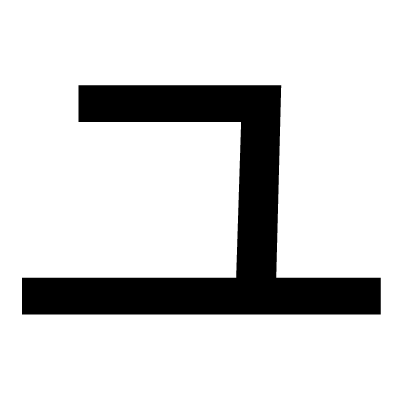
<style>
.page{position:relative;width:400px;height:400px;background:#ffffff}
.page>*{position:absolute;margin:0}
.t1{font:424.8px "MS-PGothic";color:#000000}
</style>
<div class="page">
<p class="t1" style="left:22px;top:85px;width:359px;height:230px">ユ</p>
</div>
